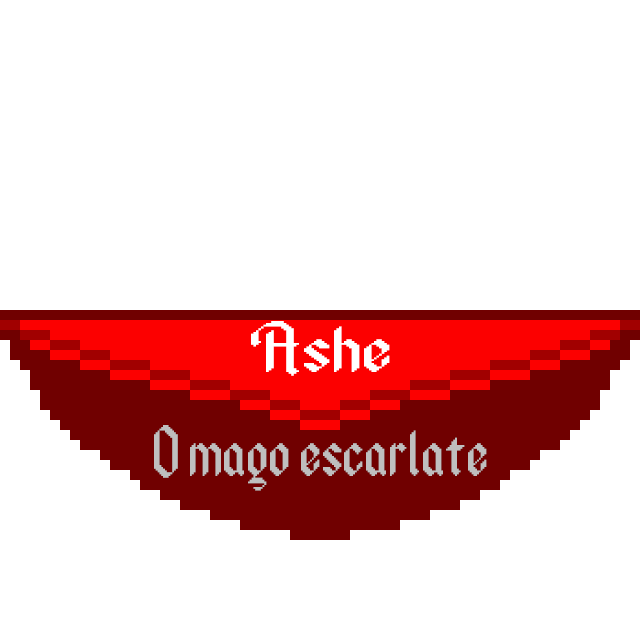
<style>
.page{position:relative;width:640px;height:640px;background:#ffffff}
.page>*{position:absolute;margin:0}
.t1{font:60px "Ancient-Modern-Tales";color:#ffffff;scale:1.39 1}
.t2{font:60px "Ancient-Modern-Tales";color:#bfbfbf}
</style>
<div class="page">
<p class="t1" style="left:251px;top:321px;width:139px;height:55px">Ashe</p>
<p class="t2" style="left:154px;top:425px;width:333px;height:66px">O mago escarlate</p>
</div>
